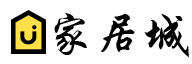
<style>
.page{position:relative;width:192px;height:64px;background:#ffffff}
.page>*{position:absolute;margin:0}
.t1{font:48px "STXingkai-SC-Bold";color:#000000}
</style>
<div class="page">
<p class="t1" style="left:54px;top:13px;width:135px;height:44px">家居城</p>
</div>
